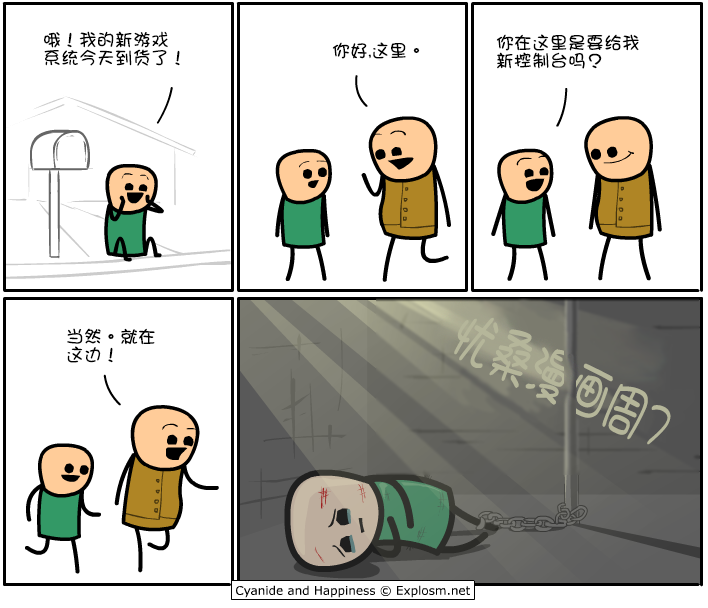
<style>
.page{position:relative;width:708px;height:608px;background:#ffffff}
.page>*{position:absolute;margin:0}
.t1{font:18px/18px "DFGirl";color:#000000}
.t2{font:18px "DFGirl";color:#000000}
.t3{font:62.1px "DFGirl";color:#b5b69a;scale:0.68 1}
</style>
<div class="page">
<p class="t1" style="left:44px;top:31px;width:136px;height:35px">哦！我的新游戏<br>系统今天到货了！</p>
<p class="t1" style="left:496px;top:34px;width:143px;height:35px">你在这里是要给我<br>新控制台吗？</p>
<p class="t2" style="left:332px;top:42px;width:88px;height:17px">你好,这里。</p>
<p class="t3" style="left:454px;top:317px;width:217px;height:128px;rotate:25deg">忧桑漫画周7</p>
<p class="t1" style="left:67px;top:328px;width:88px;height:35px">当然。就在<br>这边！</p>
</div>
